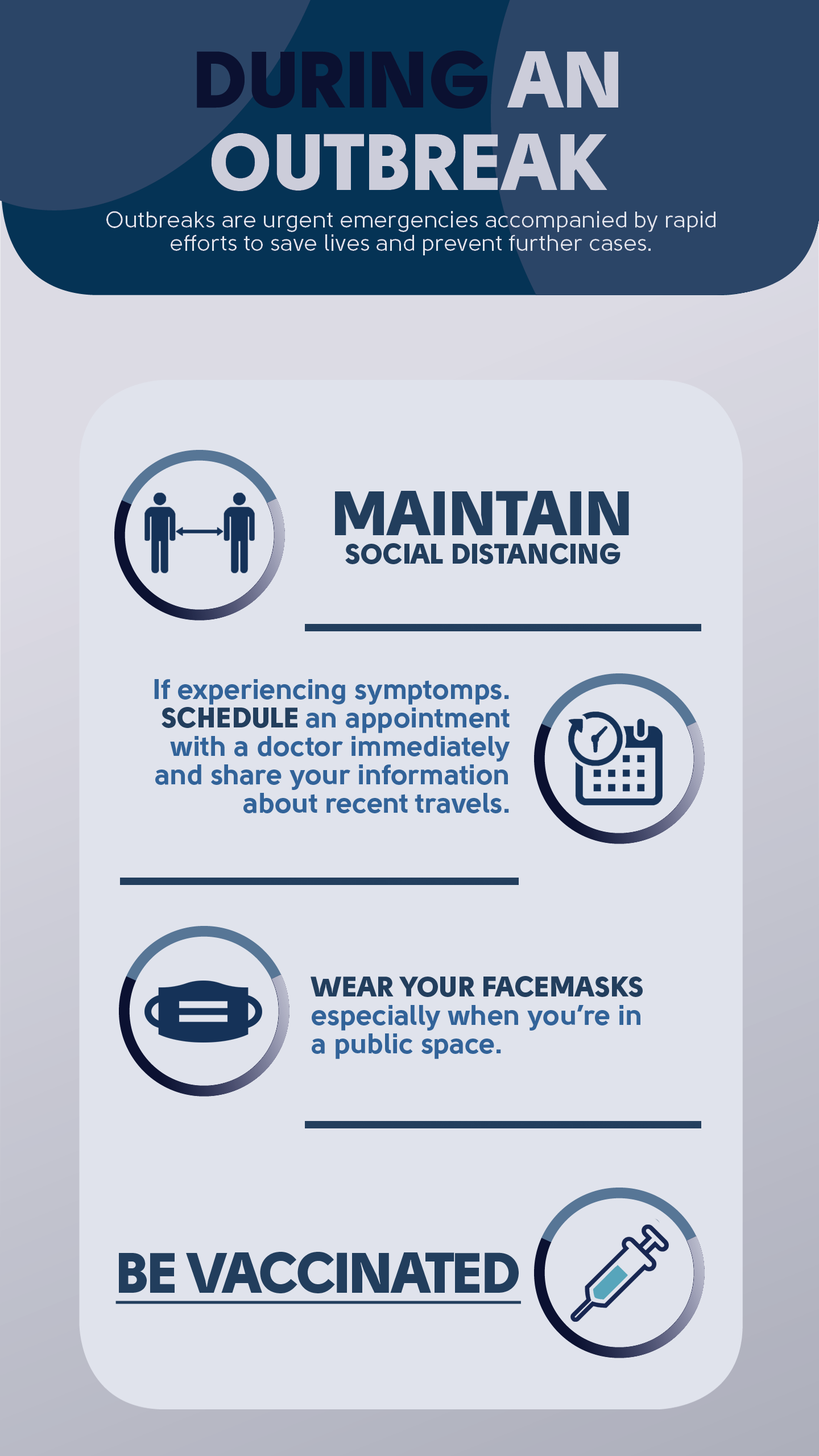
<style>
.page{position:relative;width:819px;height:1456px;background:#e0e3ec}
.page>*{position:absolute;margin:0}
.t1{font:28.4px/28.4px "Solomon-Sans-Black";color:#223e5d}
.t2{font:62.6px/28.4px "Solomon-Sans-Black";color:#223e5d}
.t3{font:28.4px/28.4px "Solomon-Sans-Bold";color:#326399}
.t4{font:56.9px "Solomon-Sans-Black";letter-spacing:-0.025em;color:#223e5d;text-decoration:underline}
</style>
<div class="page">
<p class="t1" style="left:335px;top:491px;width:294px;height:73px;text-align:center"><span class="t2">MAINTAIN<br></span>SOCIAL DISTANCING</p>
<p class="t3" style="left:154px;top:679px;width:356px;height:134px;text-align:right">If experiencing symptomps.<br><span class="t1">SCHEDULE </span>an appointment<br>with a doctor immediately<br>and share your information<br>about recent travels.</p>
<p class="t3" style="left:311px;top:976px;width:332px;height:83px"><span class="t1">WEAR YOUR FACEMASKS </span><br>especially when you’re in<br>a public space.</p>
<p class="t4" style="left:115px;top:1252px;width:406px;height:52px">BE VACCINATED</p>
</div>
